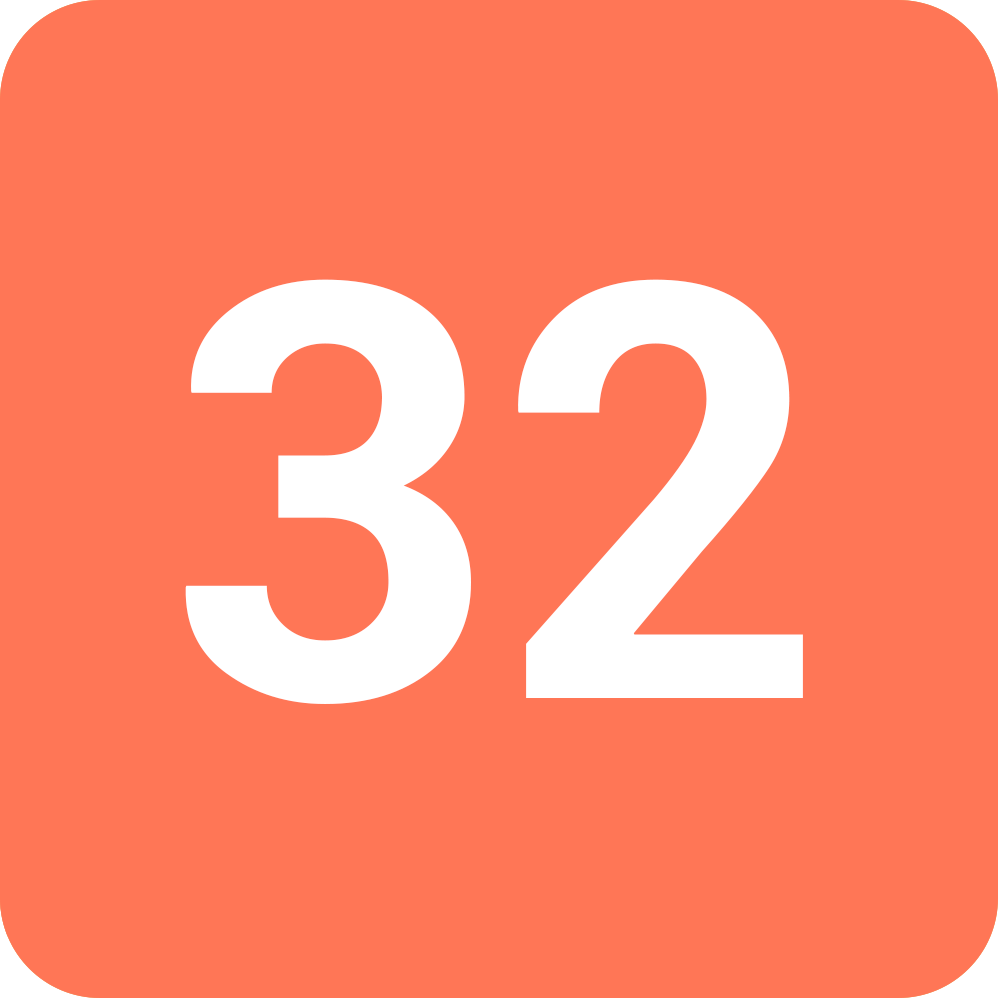
<style>
.page{position:relative;width:998px;height:998px;background:#ff7656}
.page>*{position:absolute;margin:0}
.t1{font:580px "Roboto-Bold";color:#ffffff}
</style>
<div class="page">
<p class="t1" style="left:185px;top:279px;width:618px;height:425px">32</p>
</div>
